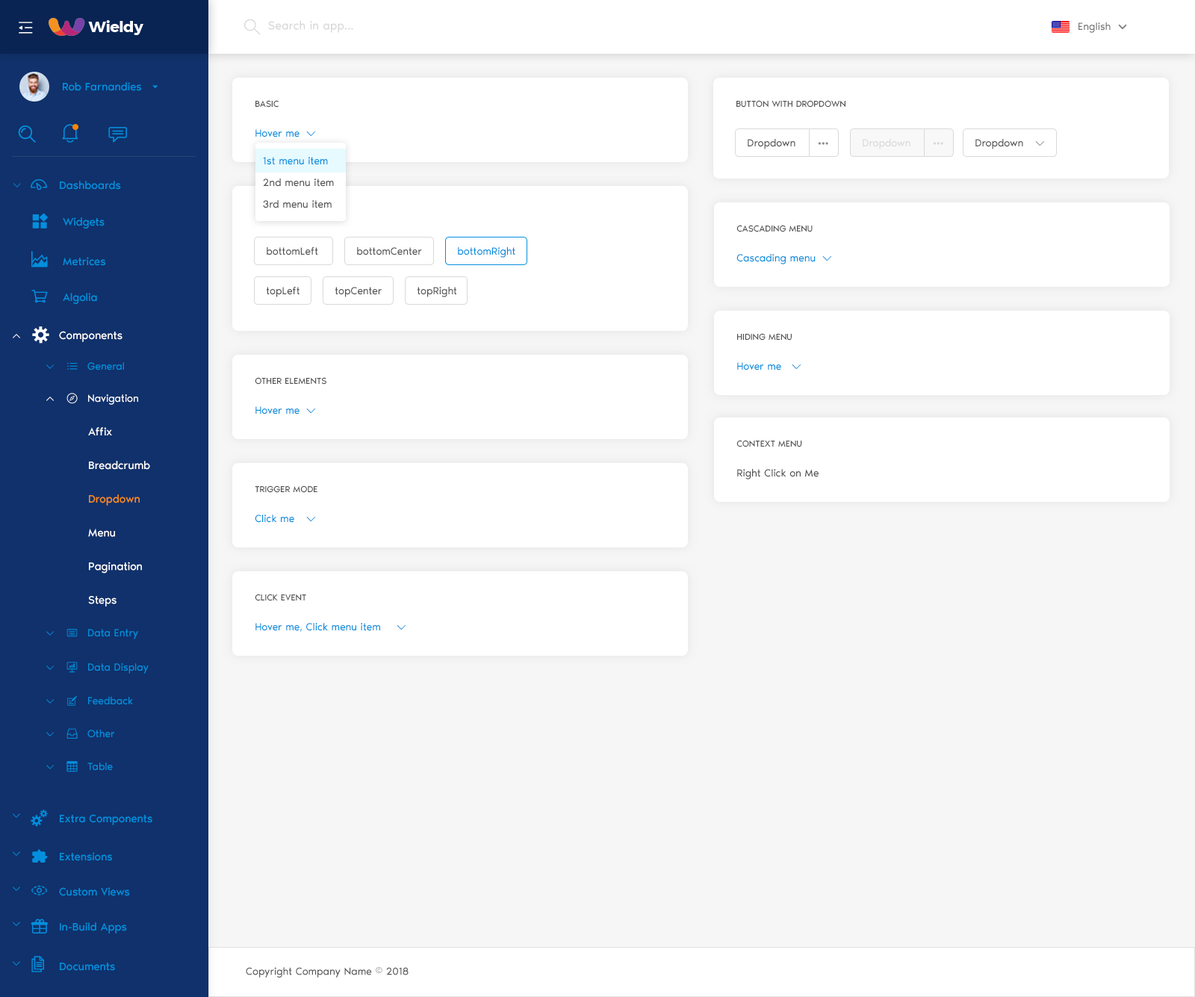
<style>
.page{position:relative;width:1195px;height:997px;background:#ffffff}
.page>*{position:absolute;margin:0}
.t1{font:12px "NoirPro-Regular";color:#d9d9d9}
.t2{font:10.5px "NoirPro-Regular";color:#757575}
.t3{font:11.2px "NoirPro-Regular";color:#038fde}
.t4{font:9px "NoirPro-Regular";color:#535353;text-transform:uppercase}
.t5{font:10.5px "NoirPro-Regular";color:#038fde}
.t6{font:10.5px "gaxonant"}
.t7{font:10.5px "NoirPro-Regular";color:#535353}
.t8{font:10.5px "gaxonant";color:#8c8c8c}
.t9{font:10.5px "NoirPro-Regular";color:#d9d9d9}
.t10{font:10.5px "gaxonant";color:#d9d9d9}
.t11{font:10.5px/21.7px "NoirPro-Regular";color:#535353}
.t12{font:10.5px/21.7px "NoirPro-Regular";color:#038fde}
.t13{font:9px "gaxonant"}
.t14{font:16.4px "gaxonant";color:#038fde}
.t15{font:16.4px "gaxonant";color:#ffffff}
.t16{font:11.2px "NoirPro-Regular";color:#ffffff}
.t17{font:9px "gaxonant";color:#038fde}
.t18{font:10.5px "gaxonant";color:#038fde}
.t19{font:10.5px "NoirPro-Regular";color:#ffffff}
.t20{font:11.2px/29.9px "NoirPro-Regular";color:#ffffff}
.t21{font:11.2px/29.9px "NoirPro-Regular";color:#fa8c16}
.t22{font:8.7px "gaxonant";color:#038fde}
.t23{font:10.5px "NoirPro-Regular";color:#595959}
</style>
<div class="page">
<p class="t1" style="left:268px;top:21px;width:85px;height:12px">Search in app...</p>
<p class="t2" style="left:1079px;top:22px;width:32px;height:11px">English</p>
<p class="t3" style="left:63px;top:82px;width:78px;height:9px">Rob Farnandies</p>
<p class="t4" style="left:256px;top:100px;width:23px;height:8px">Basic</p>
<p class="t4" style="left:737px;top:100px;width:109px;height:8px">Button with Dropdown</p>
<p class="t5" style="left:256px;top:129px;width:44px;height:8px">Hover me</p>
<p class="t6" style="left:306px;top:132px;width:9px;height:4px">2</p>
<p class="t7" style="left:748px;top:139px;width:48px;height:10px">Dropdown</p>
<p class="t8" style="left:818px;top:142px;width:11px;height:3px">{</p>
<p class="t9" style="left:863px;top:139px;width:48px;height:10px">Dropdown</p>
<p class="t10" style="left:933px;top:142px;width:11px;height:3px">{</p>
<p class="t7" style="left:976px;top:139px;width:48px;height:10px">Dropdown</p>
<p class="t8" style="left:1036px;top:141px;width:9px;height:5px">2</p>
<p class="t11" style="left:263px;top:157px;width:71px;height:51px"><span class="t12">1st menu item<br></span>2nd menu item<br>3rd menu item</p>
<p class="t13" style="left:13px;top:183px;width:8px;height:5px">2</p>
<p class="t14" style="left:31px;top:179px;width:16px;height:12px">-</p>
<p class="t3" style="left:60px;top:181px;width:61px;height:9px">Dashboards</p>
<p class="t3" style="left:63px;top:217px;width:42px;height:12px">Widgets</p>
<p class="t4" style="left:737px;top:225px;width:76px;height:7px">Cascading Menu</p>
<p class="t14" style="left:31px;top:251px;width:17px;height:16px">m</p>
<p class="t3" style="left:63px;top:257px;width:42px;height:9px">Metrices</p>
<p class="t7" style="left:267px;top:247px;width:51px;height:9px">bottomLeft</p>
<p class="t7" style="left:357px;top:247px;width:65px;height:9px">bottomCenter</p>
<p class="t5" style="left:458px;top:247px;width:58px;height:11px">bottomRight</p>
<p class="t5" style="left:737px;top:254px;width:79px;height:10px">Cascading menu</p>
<p class="t6" style="left:823px;top:256px;width:9px;height:5px">2</p>
<p class="t3" style="left:63px;top:293px;width:34px;height:11px">Algolia</p>
<p class="t7" style="left:266px;top:287px;width:34px;height:10px">topLeft</p>
<p class="t7" style="left:335px;top:287px;width:47px;height:10px">topCenter</p>
<p class="t7" style="left:417px;top:287px;width:40px;height:10px">topRight</p>
<p class="t15" style="left:32px;top:327px;width:17px;height:17px">%</p>
<p class="t13" style="left:13px;top:334px;width:7px;height:4px">5</p>
<p class="t16" style="left:59px;top:331px;width:64px;height:11px">Components</p>
<p class="t4" style="left:737px;top:333px;width:55px;height:8px">Hiding Menu</p>
<p class="t17" style="left:46px;top:365px;width:8px;height:4px">2</p>
<p class="t18" style="left:67px;top:362px;width:11px;height:8px">h</p>
<p class="t5" style="left:87px;top:362px;width:37px;height:9px">General</p>
<p class="t5" style="left:737px;top:362px;width:45px;height:9px">Hover me</p>
<p class="t6" style="left:792px;top:365px;width:9px;height:4px">2</p>
<p class="t4" style="left:255px;top:377px;width:72px;height:8px">Other Elements</p>
<p class="t13" style="left:46px;top:397px;width:8px;height:4px">5</p>
<p class="t19" style="left:88px;top:395px;width:50px;height:10px">Navigation</p>
<p class="t5" style="left:256px;top:406px;width:44px;height:9px">Hover me</p>
<p class="t6" style="left:306px;top:409px;width:9px;height:4px">2</p>
<p class="t20" style="left:88px;top:427px;width:62px;height:180px">Affix<br>Breadcrumb<br><span class="t21">Dropdown<br></span>Menu<br>Pagination<br>Steps</p>
<p class="t4" style="left:737px;top:440px;width:65px;height:8px">Context Menu</p>
<p class="t7" style="left:737px;top:469px;width:82px;height:11px">Right Click on Me</p>
<p class="t4" style="left:255px;top:486px;width:63px;height:7px">Trigger Mode</p>
<p class="t5" style="left:255px;top:515px;width:39px;height:8px">Click me</p>
<p class="t6" style="left:306px;top:517px;width:9px;height:5px">2</p>
<p class="t4" style="left:255px;top:594px;width:51px;height:7px">Click Event</p>
<p class="t18" style="left:66px;top:629px;width:12px;height:8px">/</p>
<p class="t5" style="left:88px;top:629px;width:50px;height:11px">Data Entry</p>
<p class="t5" style="left:256px;top:623px;width:124px;height:9px">Hover me, Click menu item</p>
<p class="t6" style="left:397px;top:625px;width:9px;height:5px">2</p>
<p class="t17" style="left:46px;top:631px;width:8px;height:5px">2</p>
<p class="t17" style="left:46px;top:666px;width:8px;height:4px">2</p>
<p class="t18" style="left:66px;top:662px;width:12px;height:11px">.</p>
<p class="t5" style="left:88px;top:663px;width:61px;height:11px">Data Display</p>
<p class="t17" style="left:46px;top:699px;width:8px;height:5px">2</p>
<p class="t5" style="left:88px;top:697px;width:45px;height:8px">Feedback</p>
<p class="t17" style="left:46px;top:732px;width:8px;height:5px">2</p>
<p class="t5" style="left:87px;top:730px;width:27px;height:8px">Other</p>
<p class="t17" style="left:46px;top:765px;width:8px;height:5px">2</p>
<p class="t5" style="left:87px;top:763px;width:26px;height:8px">Table</p>
<p class="t22" style="left:13px;top:814px;width:7px;height:4px">2</p>
<p class="t3" style="left:60px;top:814px;width:92px;height:12px">Extra Components</p>
<p class="t22" style="left:13px;top:852px;width:7px;height:4px">2</p>
<p class="t3" style="left:60px;top:853px;width:52px;height:8px">Extensions</p>
<p class="t22" style="left:13px;top:887px;width:7px;height:4px">2</p>
<p class="t14" style="left:31px;top:885px;width:16px;height:11px">,</p>
<p class="t3" style="left:59px;top:888px;width:71px;height:9px">Custom Views</p>
<p class="t22" style="left:13px;top:922px;width:7px;height:4px">2</p>
<p class="t3" style="left:60px;top:923px;width:67px;height:11px">In-Build Apps</p>
<p class="t22" style="left:13px;top:962px;width:7px;height:4px">2</p>
<p class="t14" style="left:31px;top:956px;width:13px;height:17px">)</p>
<p class="t3" style="left:60px;top:963px;width:55px;height:8px">Documents</p>
<p class="t23" style="left:246px;top:968px;width:163px;height:10px">Copyright Company Name © 2018</p>
</div>
